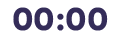
<style>
.page{position:relative;width:120px;height:40px;background:#ffffff}
.page>*{position:absolute;margin:0}
.t1{font:32px "CoHeadlineCorp-Bold";color:#342c59}
</style>
<div class="page">
<p class="t1" style="left:13px;top:7px;width:95px;height:24px">00:00</p>
</div>
